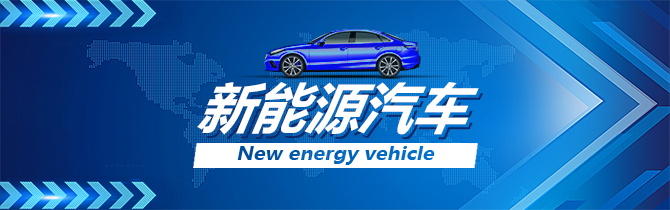
<style>
.page{position:relative;width:670px;height:210px}
.page>*{position:absolute;margin:0}
.t1{font:55.4px "MicrosoftYaHei-Bold";color:#ffffff;font-style:italic}
</style>
<div class="page">
<p class="t1" style="left:197px;top:82px;width:282px;height:53px">新能源汽车</p>
</div>
